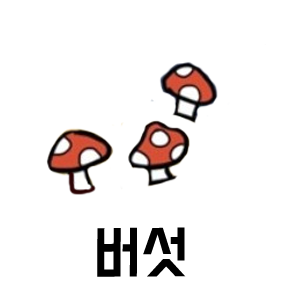
<style>
.page{position:relative;width:300px;height:300px;background:#ffffff}
.page>*{position:absolute;margin:0}
.t1{font:51.5px "BMDoHyeon";color:#000000;scale:0.96 1}
</style>
<div class="page">
<p class="t1" style="left:97px;top:227px;width:89px;height:50px">버섯</p>
</div>
